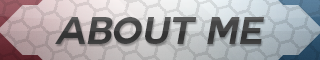
<style>
.page{position:relative;width:320px;height:60px}
.page>*{position:absolute;margin:0}
.t1{font:37.5px "Couture-Bold";color:#454545;font-style:italic}
</style>
<div class="page">
<p class="t1" style="left:55px;top:17px;width:209px;height:27px">ABOUT ME</p>
</div>
